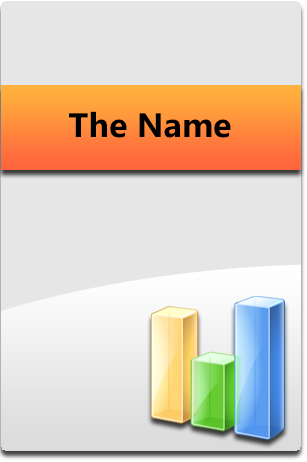
<style>
.page{position:relative;width:307px;height:462px;background:#e6e6e6}
.page>*{position:absolute;margin:0}
.t1{font:34px "SegoeUI-Bold";color:#000000}
</style>
<div class="page">
<p class="t1" style="left:69px;top:111px;width:162px;height:27px">The Name</p>
</div>
